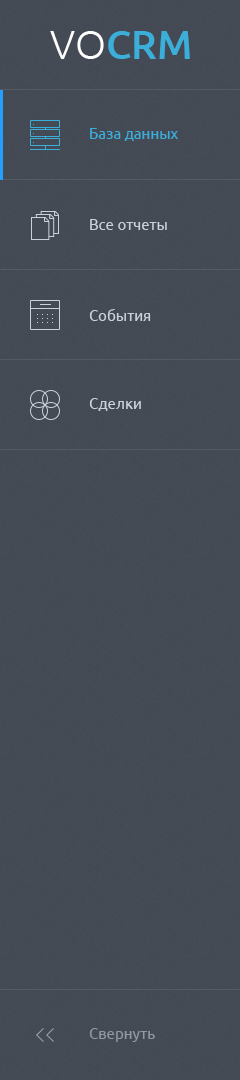
<style>
.page{position:relative;width:240px;height:1080px}
.page>*{position:absolute;margin:0}
.t1{font:40px "Ubuntu-Medium";color:#3caeda;text-transform:uppercase}
.t2{font:40px "Ubuntu-Light";color:#ffffff;text-transform:uppercase}
.t3{font:15px "Ubuntu";color:#3caeda}
.t4{font:15px "Ubuntu";color:#ccd0d9}
.t5{font:15px "Ubuntu";color:#9297a0}
</style>
<div class="page">
<p class="t1" style="left:50px;top:31px;width:140px;height:28px"><span class="t2">vo</span>crm</p>
<p class="t3" style="left:90px;top:128px;width:88px;height:13px">База данных</p>
<p class="t4" style="left:90px;top:219px;width:77px;height:11px">Все отчеты</p>
<p class="t4" style="left:89px;top:309px;width:62px;height:12px">События</p>
<p class="t4" style="left:89px;top:398px;width:52px;height:13px">Сделки</p>
<p class="t5" style="left:89px;top:1028px;width:66px;height:14px">Свернуть</p>
</div>
